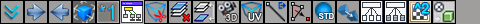
<style>
.page{position:relative;width:480px;height:24px}
.page>*{position:absolute;margin:0}
.t1{font:19.8px "ArialMT"}
.t2{font:13.9px "ArialMT";color:#00eaff;font-weight:bold}
.t3{font:7.9px "ArialMT";color:#ffffff;font-weight:bold;scale:0.93 1}
</style>
<div class="page">
<p class="t1" style="left:98px;top:5px;width:16px;height:15px">*1</p>
<p class="t2" style="left:414px;top:3px;width:15px;height:11px">^2</p>
<p class="t3" style="left:319px;top:13px;width:15px;height:6px">STD</p>
</div>
